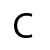
<style>
.page{position:relative;width:50px;height:50px;background:#ffffff}
.page>*{position:absolute;margin:0}
.t1{font:36px "MyriadPro-Regular";color:#000000}
</style>
<div class="page">
<p class="t1" style="left:14px;top:13px;width:19px;height:25px">C</p>
</div>
